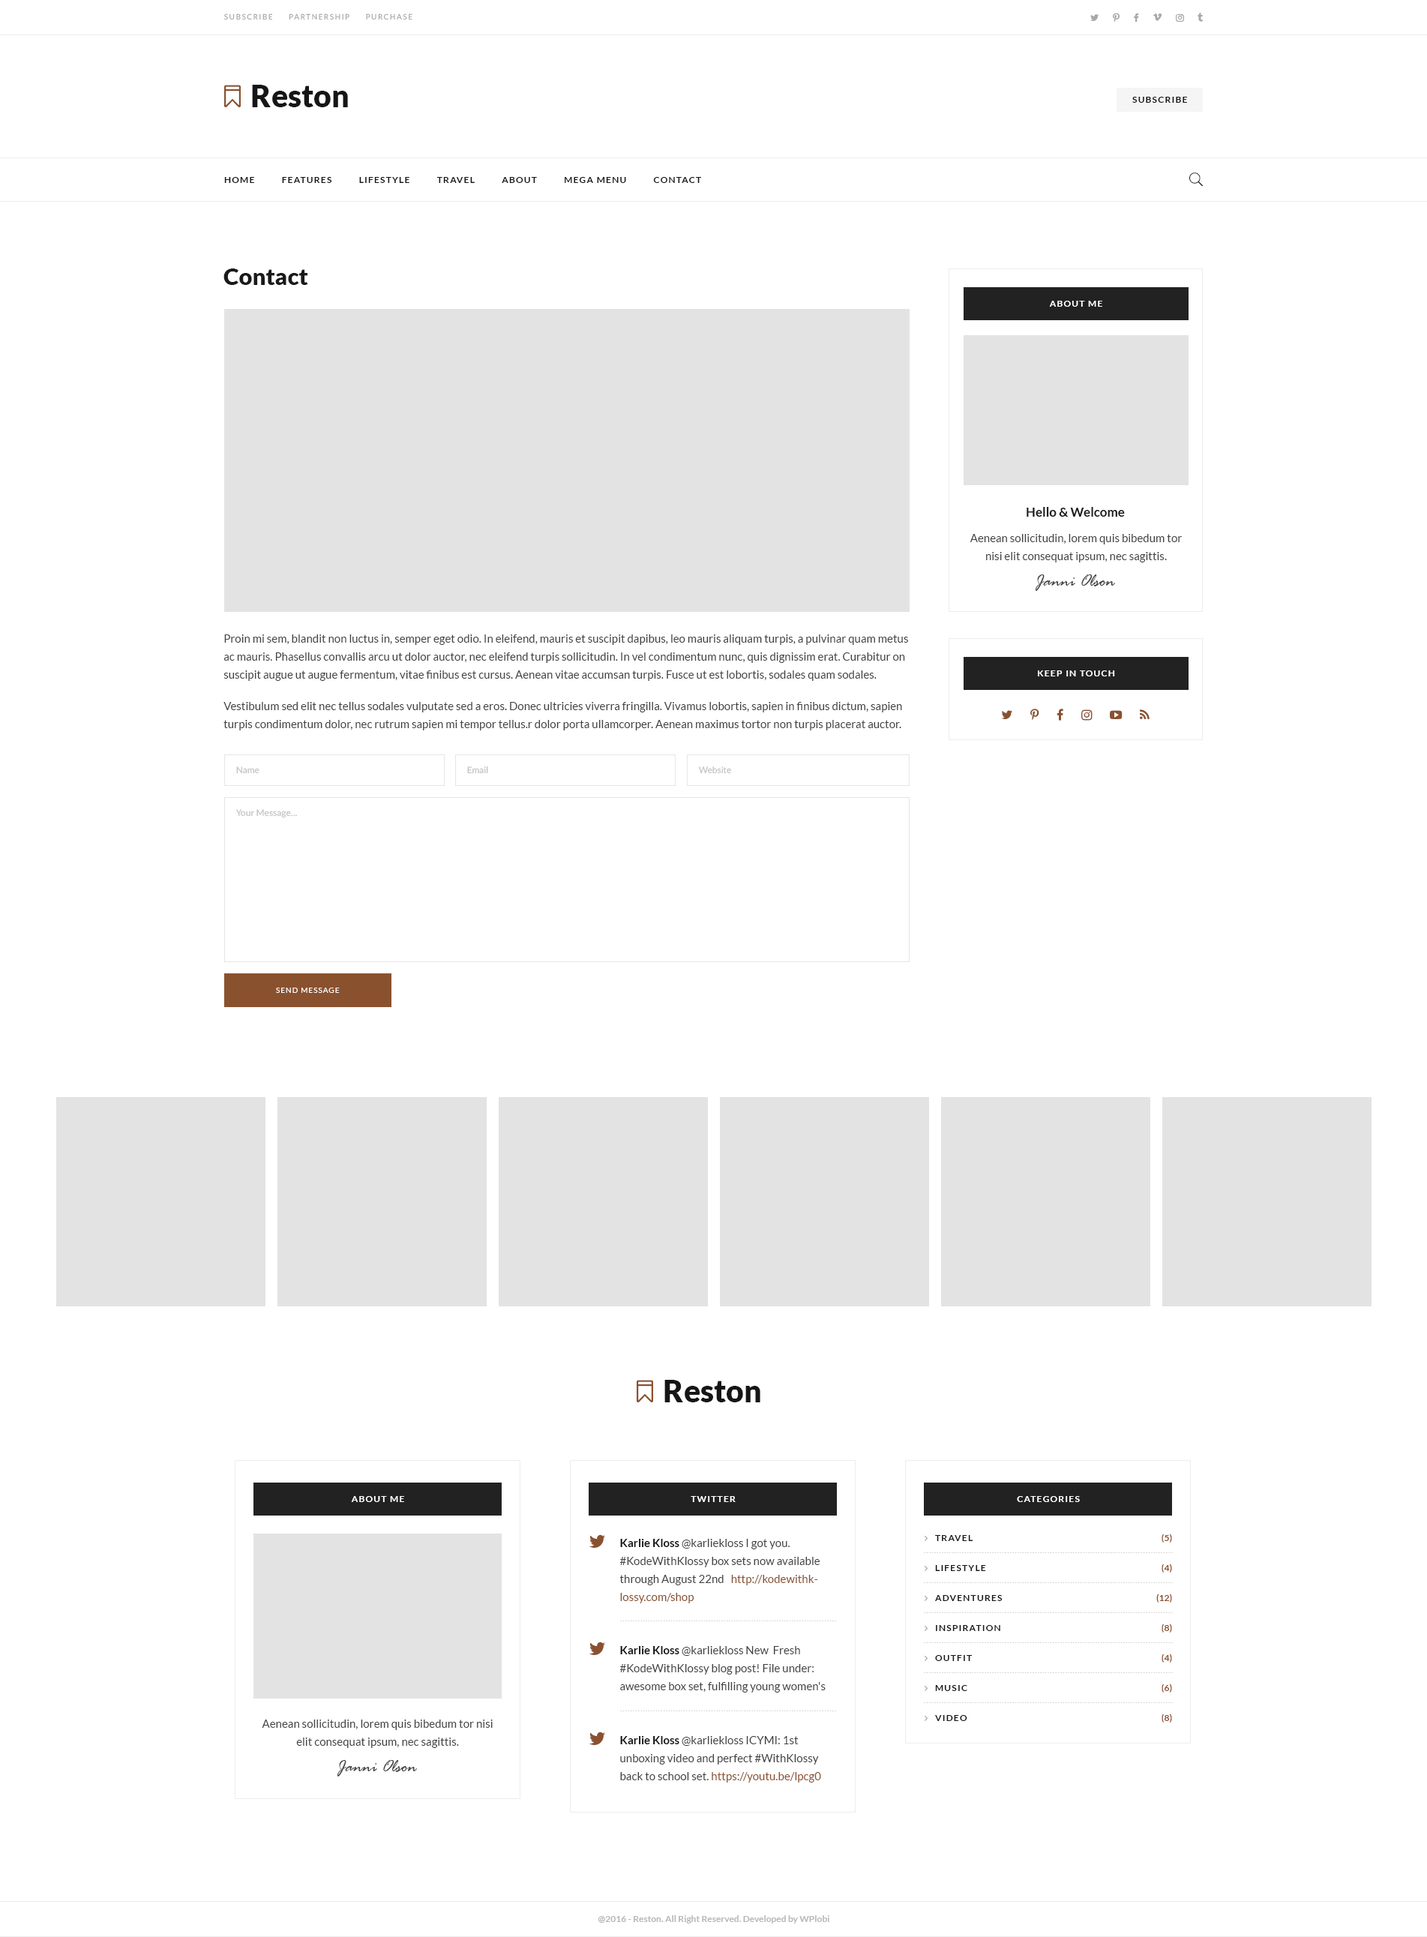
<style>
.page{position:relative;width:1427px;height:1937px;background:#ffffff}
.page>*{position:absolute;margin:0}
.t1{font:7.5px "Lato-Medium";letter-spacing:0.15em;color:#a8a8a8;text-transform:uppercase}
.t2{font:30.8px "Lato-Black";color:#161616}
.t3{font:9px "Lato-Bold";letter-spacing:0.1em;color:#171717;text-transform:uppercase}
.t4{font:23.2px "Lato-Black";color:#1a1a1a}
.t5{font:9px "Lato-Bold";letter-spacing:0.1em;color:#ffffff;text-transform:uppercase}
.t6{font:12.8px "Lato-Bold";color:#1a1a1a}
.t7{font:11.2px/18px "Lato-Regular";color:#424242}
.t8{font:18px "RageItalic";color:#414141}
.t9{font:11.2px/13.5px "Lato-Regular";color:#424242}
.t10{font:9px "Lato-Medium";color:#c4c4c4}
.t11{font:7.5px "Lato-Regular";letter-spacing:0.1em;color:#ffffff;text-transform:uppercase}
.t12{font:11.2px/18px "Lato-Bold";color:#161616}
.t13{font:11.2px/18px "Lato-Regular";color:#8a512f}
.t14{font:9px/30px "Lato-Bold";letter-spacing:0.1em;color:#171717;text-transform:uppercase}
.t15{font:9px/30px "Lato-Bold";color:#8a512f;text-transform:uppercase}
.t16{font:7.5px "Lato-Black";letter-spacing:0.1em;color:#cdcdcd}
.t17{font:9px "Lato-Bold";color:#b7b7b7}
</style>
<div class="page">
<p class="t1" style="left:224px;top:14px;width:188px;height:6px">Subscribe     partnership     Purchase</p>
<p class="t2" style="left:252px;top:85px;width:96px;height:22px">Reston</p>
<p class="t3" style="left:1132px;top:97px;width:55px;height:6px">Subscribe</p>
<p class="t3" style="left:224px;top:177px;width:478px;height:6px">Home          Features          Lifestyle          Travel          About          Mega Menu          Contact</p>
<p class="t4" style="left:224px;top:268px;width:84px;height:17px">Contact</p>
<p class="t5" style="left:1049px;top:301px;width:53px;height:6px">About Me</p>
<p class="t6" style="left:1027px;top:507px;width:98px;height:10px">Hello &amp; Welcome</p>
<p class="t7" style="left:970px;top:534px;width:212px;height:28px;text-align:center">Aenean sollicitudin, lorem quis bibedum tor nisi elit consequat ipsum, nec sagittis.</p>
<p class="t8" style="left:1035px;top:574px;width:81px;height:17px">Janni Olson</p>
<p class="t7" style="left:224px;top:634px;width:684px;height:96px">Proin mi sem, blandit non luctus in, semper eget odio. In eleifend, mauris et suscipit dapibus, leo mauris aliquam turpis, a pulvinar quam metus ac mauris. Phasellus convallis arcu ut dolor auctor, nec eleifend turpis sollicitudin. In vel condimentum nunc, quis dignissim erat. Curabitur on suscipit augue ut augue fermentum, vitae finibus est cursus. Aenean vitae accumsan turpis. Fusce ut est lobortis, sodales quam sodales<span class="t9">. <br><br>Ve</span>stibulum sed elit nec tellus sodales vulputate sed a eros. Donec ultricies viverra fringilla. Vivamus lobortis, sapien in finibus dictum, sapien turpis condimentum dolor, nec rutrum sapien mi tempor tellus.r dolor porta ullamcorper. Aenean maximus tortor non turpis placerat auctor.</p>
<p class="t5" style="left:1038px;top:670px;width:77px;height:6px">Keep in Touch</p>
<p class="t10" style="left:236px;top:766px;width:24px;height:8px">Name</p>
<p class="t10" style="left:467px;top:766px;width:21px;height:8px">Email</p>
<p class="t10" style="left:698px;top:766px;width:34px;height:8px">Website</p>
<p class="t10" style="left:236px;top:809px;width:61px;height:9px">Your Message...</p>
<p class="t11" style="left:276px;top:988px;width:64px;height:5px">Send message</p>
<p class="t2" style="left:664px;top:1380px;width:96px;height:22px">Reston</p>
<p class="t5" style="left:351px;top:1496px;width:53px;height:6px">About Me</p>
<p class="t5" style="left:691px;top:1496px;width:45px;height:6px">Twitter</p>
<p class="t5" style="left:1017px;top:1496px;width:63px;height:6px">Categories</p>
<p class="t7" style="left:620px;top:1539px;width:200px;height:65px"><span class="t12">Karlie Kloss</span> @karliekloss I got you. #KodeWithKlossy box sets now available through August 22nd   <span class="t13">http://kodewithklossy.com/shop</span></p>
<p class="t14" style="left:935px;top:1535px;width:68px;height:186px">Travel<br>Lifestyle<br>Adventures<br>Inspiration<br>Outfit<br>Music<br>Video</p>
<p class="t15" style="left:1156px;top:1534px;width:16px;height:189px;text-align:right">(5)<br>(4)<br>(12)<br>(8)<br>(4)<br>(6)<br>(8)</p>
<p class="t16" style="left:924px;top:1552px;width:249px;height:1px">...................................................................................................</p>
<p class="t16" style="left:924px;top:1582px;width:249px;height:1px">...................................................................................................</p>
<p class="t16" style="left:924px;top:1612px;width:249px;height:1px">...................................................................................................</p>
<p class="t16" style="left:620px;top:1621px;width:216px;height:1px">......................................................................................</p>
<p class="t7" style="left:620px;top:1646px;width:206px;height:47px"><span class="t12">Karlie Kloss</span> @karliekloss New  Fresh #KodeWithKlossy blog post! File under: awesome box set, fulfilling young women's</p>
<p class="t16" style="left:924px;top:1642px;width:249px;height:1px">...................................................................................................</p>
<p class="t16" style="left:924px;top:1672px;width:249px;height:1px">...................................................................................................</p>
<p class="t16" style="left:924px;top:1702px;width:249px;height:1px">...................................................................................................</p>
<p class="t7" style="left:262px;top:1720px;width:231px;height:28px;text-align:center">Aenean sollicitudin, lorem quis bibedum tor nisi elit consequat ipsum, nec sagittis.</p>
<p class="t16" style="left:620px;top:1711px;width:216px;height:1px">......................................................................................</p>
<p class="t7" style="left:620px;top:1736px;width:201px;height:47px"><span class="t12">Karlie Kloss</span> @karliekloss ICYMI: 1st unboxing video and perfect #WithKlossy back to school set.<span class="t13"> https://youtu.be/lpcg0</span></p>
<p class="t8" style="left:337px;top:1760px;width:81px;height:17px">Janni Olson</p>
<p class="t17" style="left:598px;top:1916px;width:232px;height:8px">@2016 - Reston. All Right Reserved. Developed by WPlobi</p>
</div>
